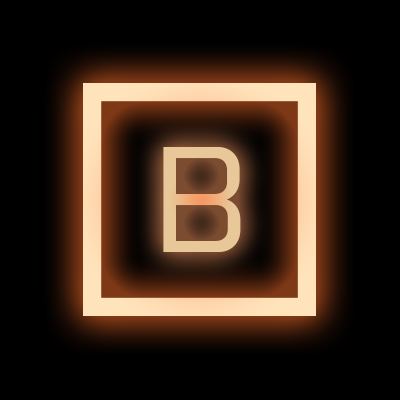
<style>
.page{position:relative;width:400px;height:400px;background:#000000}
.page>*{position:absolute;margin:0}
.t1{font:150px "Purista";color:#e8c798}
</style>
<div class="page">
<p class="t1" style="left:163px;top:147px;width:78px;height:105px">B</p>
</div>
